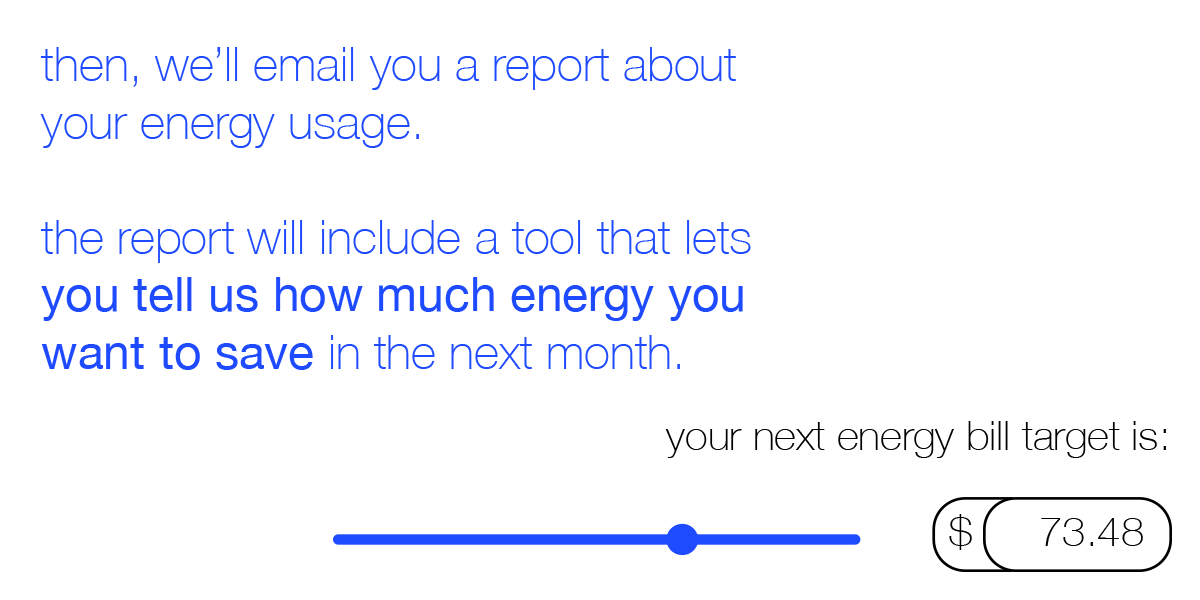
<style>
.page{position:relative;width:1200px;height:600px;background:#ffffff}
.page>*{position:absolute;margin:0}
.t1{font:48px "HelveticaNeue-Thin";color:#1e4bff}
.t2{font:48px "HelveticaNeue";color:#1e4bff}
</style>
<div class="page">
<p class="t1" style="left:40px;top:47px;width:711px;height:323px">then, we’ll email you a report about your energy usage.<br><br>the report will include a tool that lets <span class="t2">you tell us how much energy you want to save</span> in the next month.</p>
</div>
